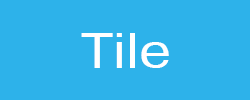
<style>
.page{position:relative;width:250px;height:100px;background:#2db2ea}
.page>*{position:absolute;margin:0}
.t1{font:48px "Helvetica";color:#ffffff;scale:1.2 1}
</style>
<div class="page">
<p class="t1" style="left:81px;top:33px;width:88px;height:35px">Tile</p>
</div>
